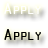
<style>
.page{position:relative;width:48px;height:48px;background:#ffffff}
.page>*{position:absolute;margin:0}
.t1{font:17px "OCRAExtended";color:#ffffff;font-variant:small-caps}
.t2{font:17px "OCRAExtended";color:#000000;font-variant:small-caps}
</style>
<div class="page">
<p class="t1" style="left:4px;top:3px;width:37px;height:11px">Apply</p>
<p class="t2" style="left:4px;top:29px;width:37px;height:11px">Apply</p>
</div>
